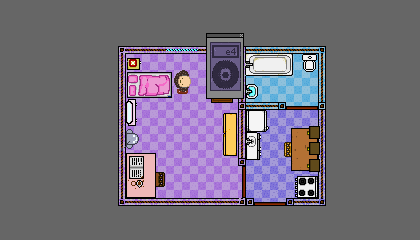
<style>
.page{position:relative;width:420px;height:240px;background:#666666}
.page>*{position:absolute;margin:0}
.t1{font:10px "Tahoma";color:#2f293f}
</style>
<div class="page">
<p class="t1" style="left:226px;top:48px;width:10px;height:7px">e4</p>
</div>
